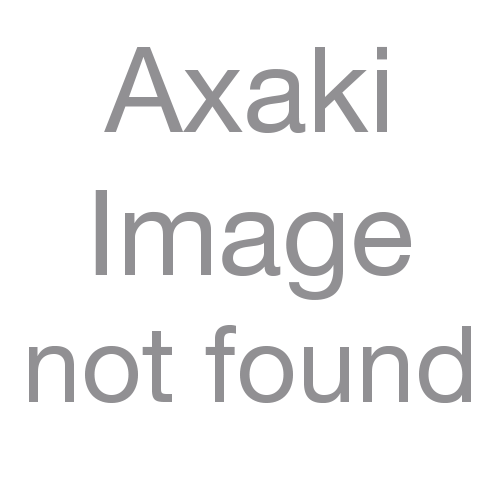
<style>
.page{position:relative;width:500px;height:500px;background:#ffffff}
.page>*{position:absolute;margin:0}
.t1{font:119px "HelveticaNeueLTPro-Roman";color:#919093}
.t2{font:106px "HelveticaNeueLTPro-Roman";color:#919093}
</style>
<div class="page">
<p class="t1" style="left:29px;top:46px;width:442px;height:357px;text-align:center">Axaki<br>Image<br><span class="t2">not found</span></p>
</div>
